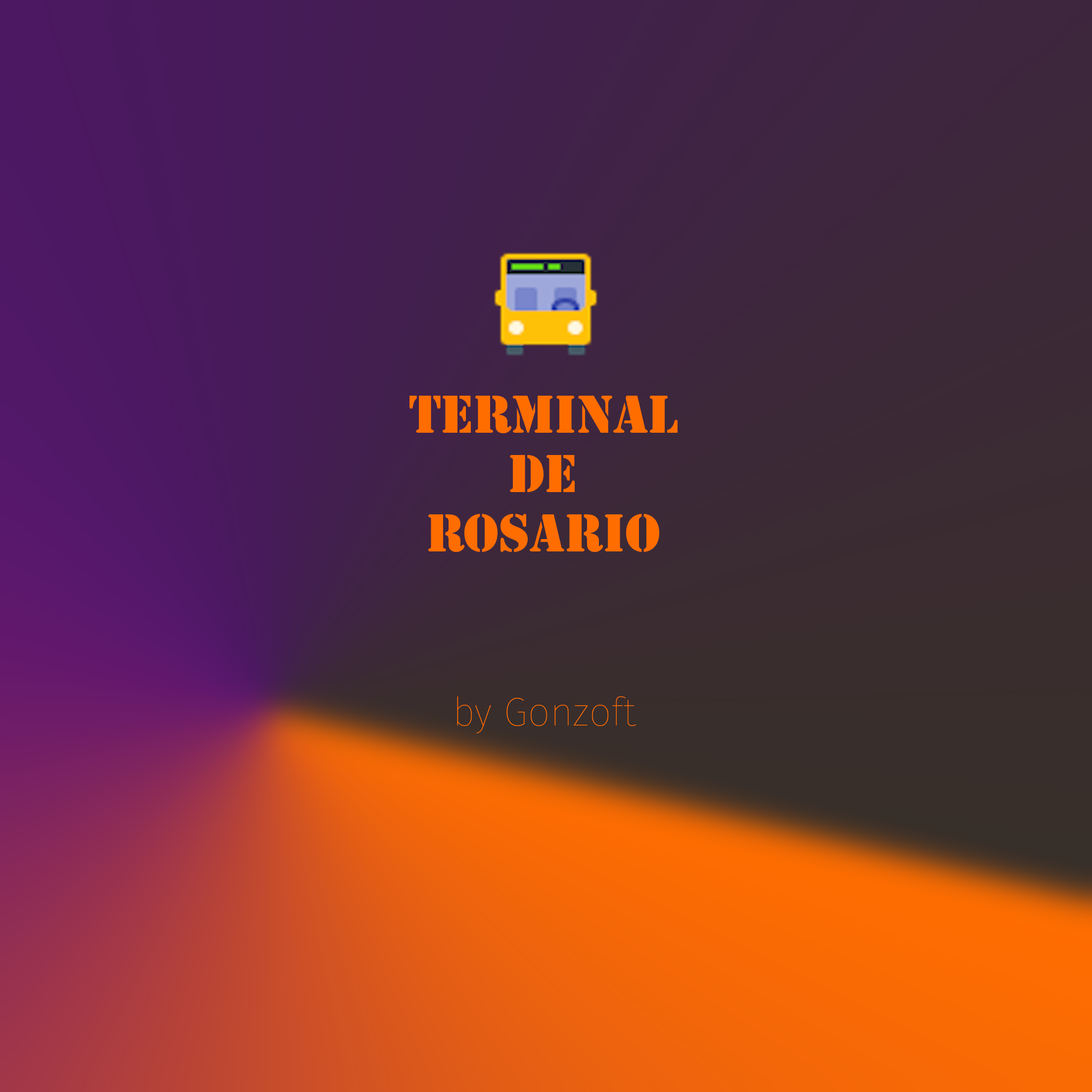
<style>
.page{position:relative;width:1092px;height:1092px}
.page>*{position:absolute;margin:0}
.t1{font:49.5px "StencilStd";color:#ff6d00}
.t2{font:39.6px "FiraSans-Hair";color:#ff6d00}
</style>
<div class="page">
<p class="t1" style="left:409px;top:396px;width:269px;height:156px;text-align:center">Terminal de Rosario</p>
<p class="t2" style="left:457px;top:696px;width:179px;height:37px">by Gonzoft</p>
</div>
